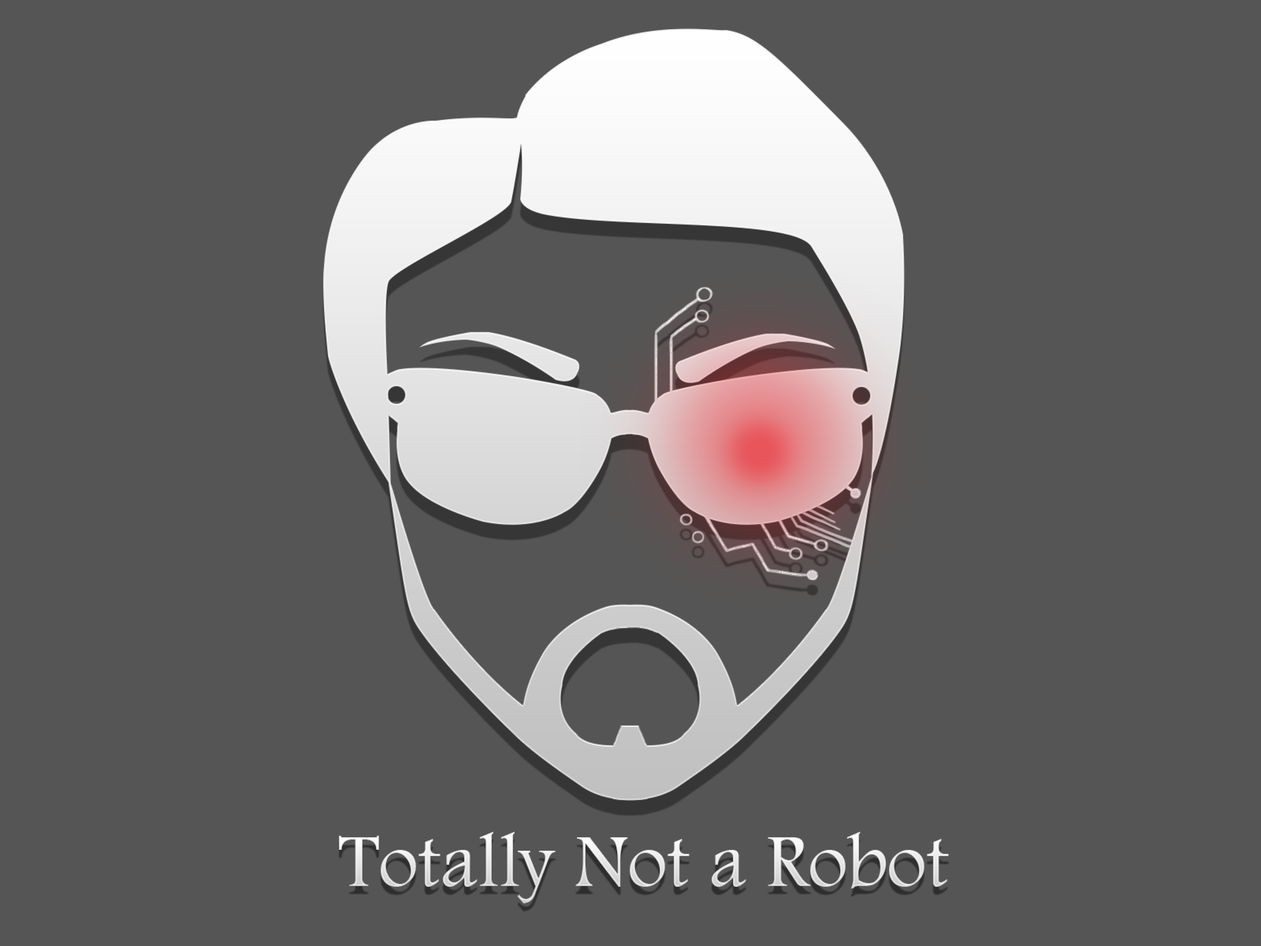
<style>
.page{position:relative;width:1261px;height:946px;background:#555555}
.page>*{position:absolute;margin:0}
.t1{font:78.8px "FootlightMTLight";color:#e6e6e6}
</style>
<div class="page">
<p class="t1" style="left:339px;top:831px;width:610px;height:72px">Totally Not a Robot</p>
</div>
